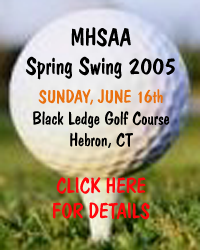
<style>
.page{position:relative;width:200px;height:250px}
.page>*{position:absolute;margin:0}
.t1{font:18px "DomCasualD-Regu";color:#000000}
.t2{font:24px "DomCasualD-Regu";color:#000000}
.t3{font:18px "DomCasualD-Regu";color:#e97110}
.t4{font:21px "DomCasualD-Regu";color:#ff060c}
</style>
<div class="page">
<p class="t1" style="left:26px;top:27px;width:149px;height:193px;text-align:center"><span class="t2">MHSAA<br>Spring Swing 2005<br><br></span><span class="t3">SUNDAY, JUNE 16th<br></span>Black Ledge Golf Course<br>Hebron, CT<br><br><span class="t4">CLICK HERE <br>FOR DETAILS</span></p>
</div>
